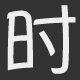
<style>
.page{position:relative;width:80px;height:80px;background:#333333}
.page>*{position:absolute;margin:0}
.t1{font:80px "YuppySC-Regular";color:#eeeeee}
</style>
<div class="page">
<p class="t1" style="left:7px;top:5px;width:69px;height:69px">时</p>
</div>
